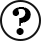
<style>
.page{position:relative;width:41px;height:41px;background:#ffffff}
.page>*{position:absolute;margin:0}
.t1{font:40px "Georgia-Bold";color:#000000}
</style>
<div class="page">
<p class="t1" style="left:12px;top:7px;width:19px;height:28px">?</p>
</div>
